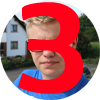
<style>
.page{position:relative;width:100px;height:100px;background:#ff0018}
.page>*{position:absolute;margin:0}
.t1{font:150px "BerlinSansFB-Reg";color:#ff0018}
</style>
<div class="page">
<p class="t1" style="left:18px;top:2px;width:65px;height:92px">3</p>
</div>
